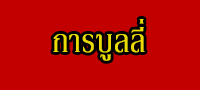
<style>
.page{position:relative;width:200px;height:90px;background:#c20000}
.page>*{position:absolute;margin:0}
.t1{font:44px "KodchiangUPC";color:#eadc02}
</style>
<div class="page">
<p class="t1" style="left:53px;top:19px;width:92px;height:42px">การบูลลี่</p>
</div>
